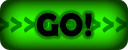
<style>
.page{position:relative;width:128px;height:50px}
.page>*{position:absolute;margin:0}
.t1{font:32.8px "BerlinSansFBDemi-Bold";color:#000000}
</style>
<div class="page">
<p class="t1" style="left:36px;top:13px;width:56px;height:24px">GO!</p>
</div>
